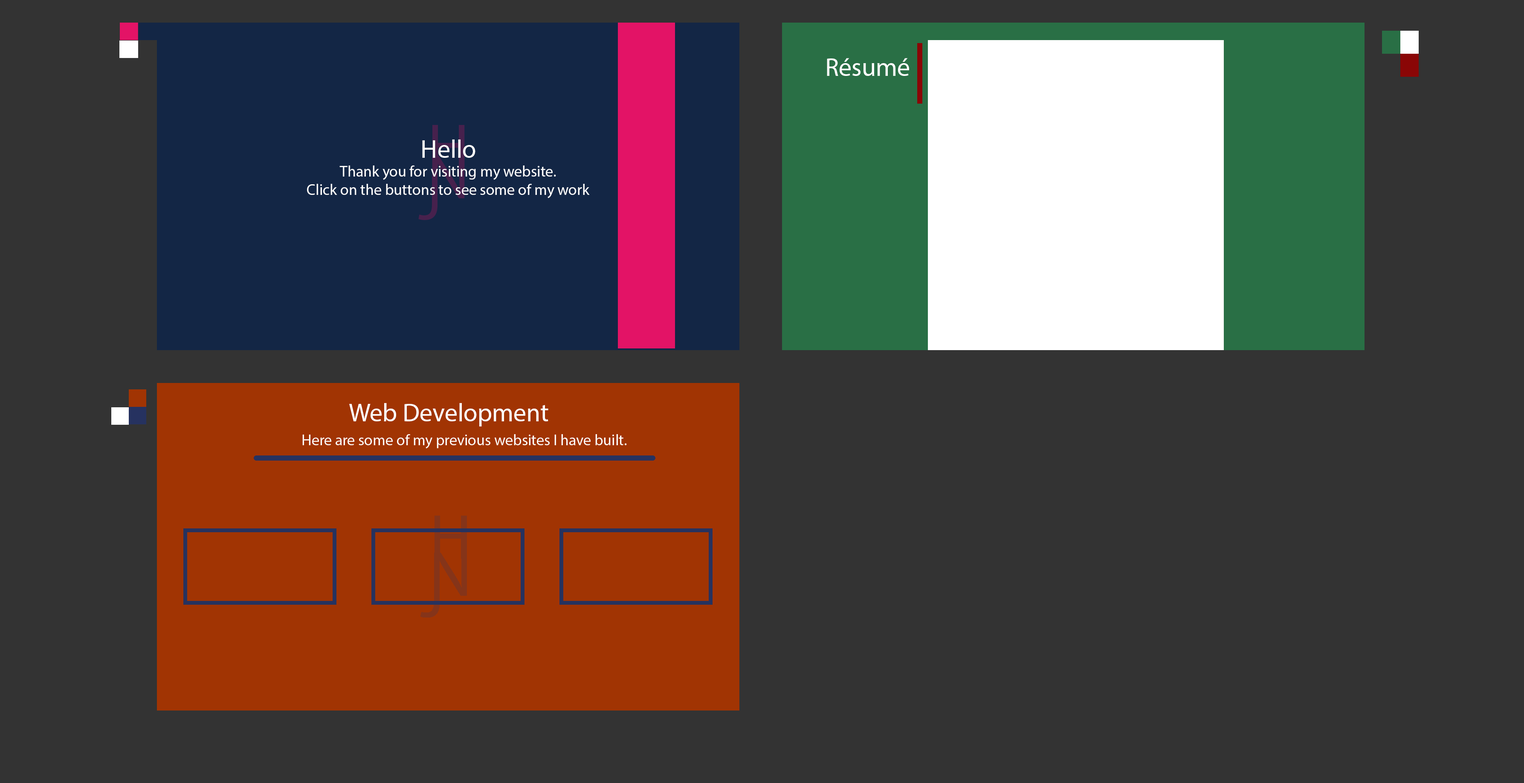
<style>
.page{position:relative;width:1524px;height:783px;background:#333333}
.page>*{position:absolute;margin:0}
.t1{font:25.6px "MyriadPro-Regular";color:#ffffff}
.t2{font:15.3px "MyriadPro-Regular";color:#fefefe}
</style>
<div class="page">
<p class="t1" style="left:827px;top:58px;width:82px;height:18px">Résumé</p>
<p class="t1" style="left:422px;top:139px;width:53px;height:19px">Hello</p>
<p class="t2" style="left:307px;top:165px;width:283px;height:33px;text-align:center">Thank you for visiting my website.<br>Click on the buttons to see some of my work</p>
<p class="t1" style="left:349px;top:403px;width:199px;height:23px">Web Development</p>
</div>
